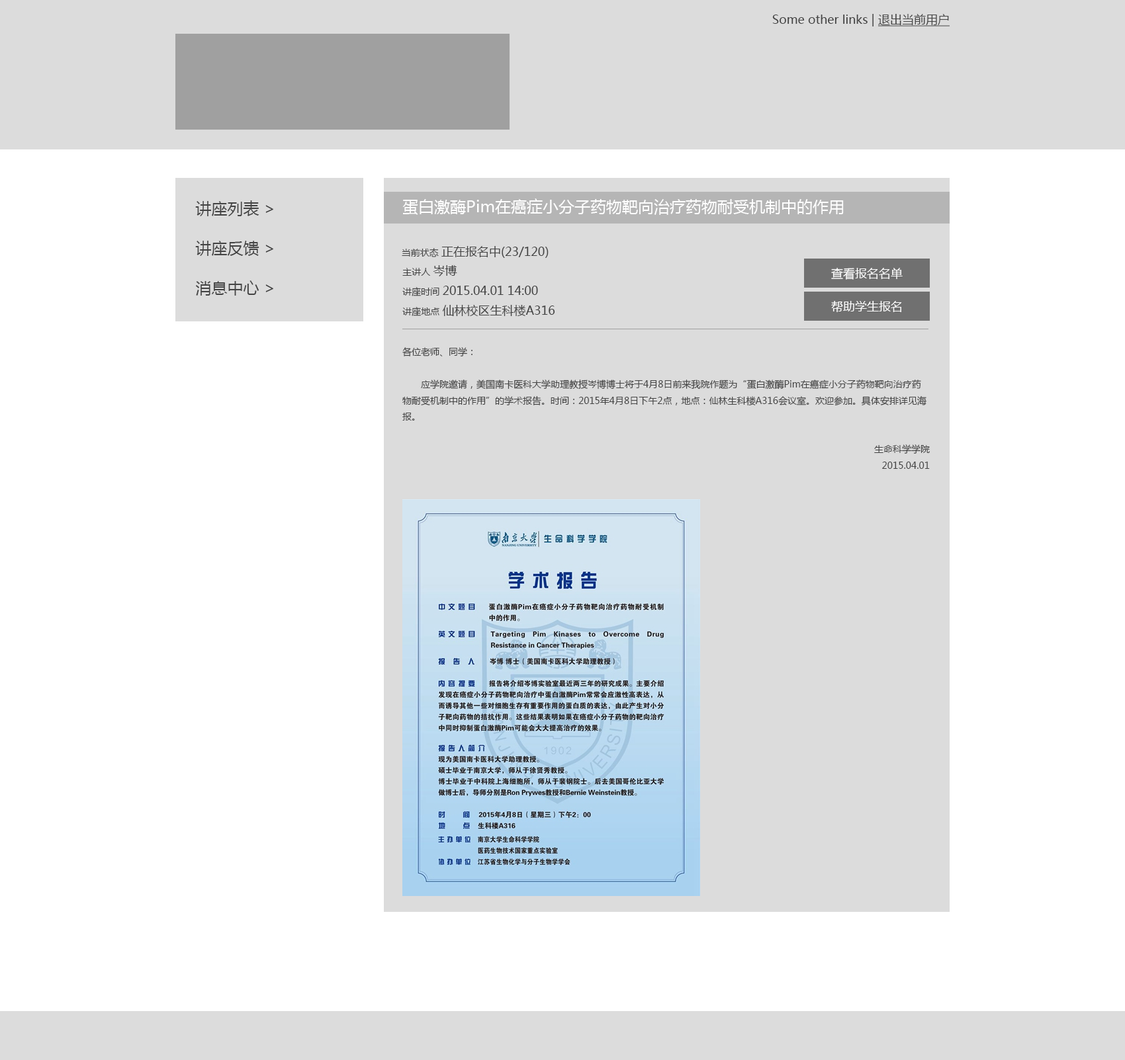
<style>
.page{position:relative;width:1125px;height:1060px;background:#ffffff}
.page>*{position:absolute;margin:0}
.t1{font:11.9px "MicrosoftYaHei";color:#434343}
.t2{font:11.9px "MicrosoftYaHei";color:#434343;text-decoration:underline}
.t3{font:15.9px/39.7px "MicrosoftYaHei";color:#434343}
.t4{font:15.9px "MicrosoftYaHei";color:#ffffff}
.t5{font:9.3px "MicrosoftYaHei";color:#434343}
.t6{font:11.9px/19.8px "MicrosoftYaHei";color:#434343}
.t7{font:9.3px/19.8px "MicrosoftYaHei";color:#434343}
.t8{font:11.9px/15.9px "MicrosoftYaHei";color:#434343}
.t9{font:11.9px "MicrosoftYaHei";color:#ffffff}
</style>
<div class="page">
<p class="t1" style="left:772px;top:14px;width:177px;height:12px">Some other links | <span class="t2">退出当前用户</span></p>
<p class="t3" style="left:195px;top:200px;width:78px;height:96px">讲座列表 &gt;<br>讲座反馈 &gt;<br>消息中心 &gt;</p>
<p class="t4" style="left:402px;top:198px;width:441px;height:17px">蛋白激酶Pim在癌症小分子药物靶向治疗药物耐受机制中的作用</p>
<p class="t1" style="left:402px;top:246px;width:146px;height:12px"><span class="t5">当前状态 </span>正在报名中(23/120)</p>
<p class="t6" style="left:402px;top:265px;width:153px;height:51px"><span class="t7">主讲人 </span><span class="t8">岑博</span><span class="t7"><br>讲座时间 </span>2015.04.01 14:00<br><span class="t7">讲座地点 </span>仙林校区生科楼A316</p>
<p class="t9" style="left:831px;top:268px;width:71px;height:12px">查看报名名单</p>
<p class="t9" style="left:831px;top:301px;width:71px;height:11px">帮助学生报名</p>
<p class="t5" style="left:402px;top:347px;width:527px;height:122px">各位老师、同学：<br><br>　　应学院邀请，美国南卡医科大学助理教授岑博博士将于4月8日前来我院作题为“蛋白激酶Pim在癌症小分子药物靶向治疗药物耐受机制中的作用”的学术报告。时间：2015年4月8日下午2点，地点：仙林生科楼A316会议室。欢迎参加。具体安排详见海报。<br><br>生命科学学院<br>2015.04.01</p>
</div>
